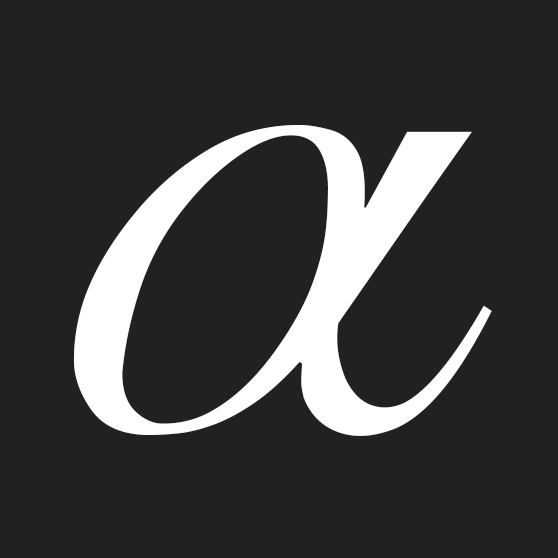
<style>
.page{position:relative;width:558px;height:558px;background:#212121}
.page>*{position:absolute;margin:0}
.t1{font:861.4px "SnellRoundhand";color:#ffffff}
</style>
<div class="page">
<p class="t1" style="left:73px;top:125px;width:419px;height:311px">ɑ</p>
</div>
